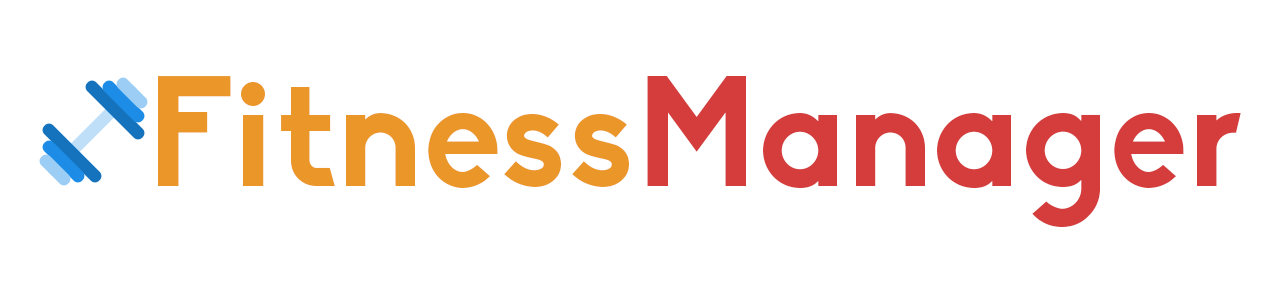
<style>
.page{position:relative;width:1280px;height:306px;background:#ffffff}
.page>*{position:absolute;margin:0}
.t1{font:155.5px "Biko-Bold";color:#eb9628}
.t2{font:155.5px "Biko-Bold";color:#d53d3d}
</style>
<div class="page">
<p class="t1" style="left:158px;top:76px;width:1083px;height:152px">Fitness<span class="t2">Manager</span></p>
</div>
